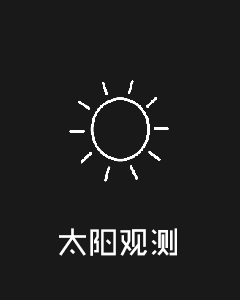
<style>
.page{position:relative;width:240px;height:300px;background:#191919}
.page>*{position:absolute;margin:0}
.t1{font:30px "RTWSShangGoG0v1-Regular";letter-spacing:0.022em;color:#ffffff}
</style>
<div class="page">
<p class="t1" style="left:59px;top:228px;width:118px;height:28px">太阳观测</p>
</div>
